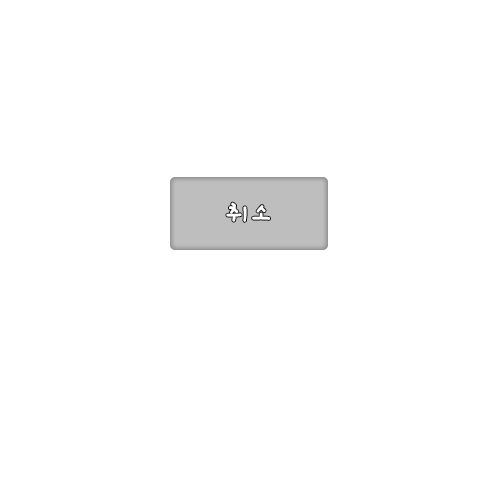
<style>
.page{position:relative;width:500px;height:500px;background:#ffffff}
.page>*{position:absolute;margin:0}
.t1{font:30px "Gaegu-Bold";color:#ffffff;scale:0.95 1}
</style>
<div class="page">
<p class="t1" style="left:226px;top:202px;width:44px;height:20px">취소</p>
</div>
